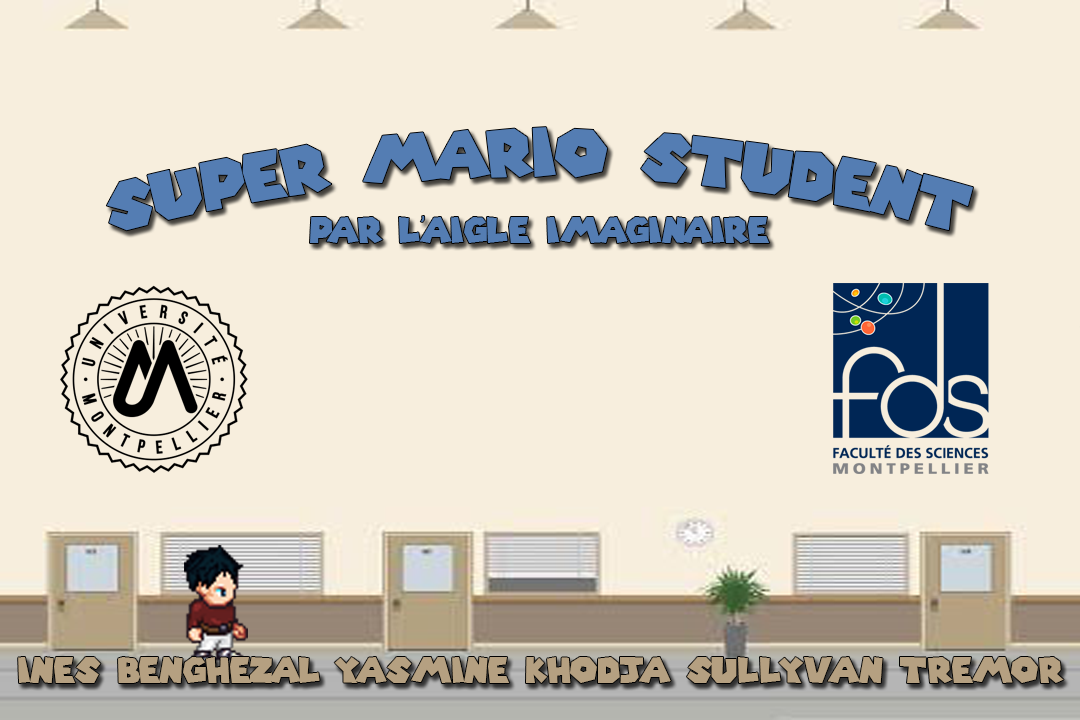
<style>
.page{position:relative;width:1080px;height:720px;background:#f7eedd}
.page>*{position:absolute;margin:0}
.t1{font:65.4px "SuperMarioGalaxy";color:#547db3}
.t2{font:35.2px "SuperMarioGalaxy";color:#547db3}
.t3{font:35px "SuperMarioGalaxy";color:#b5a081}
</style>
<div class="page">
<p class="t1" style="left:106px;top:127px;width:867px;height:104px">Super mario student</p>
<p class="t2" style="left:310px;top:216px;width:460px;height:27px">Par l’aigle imaginaire</p>
<p class="t3" style="left:18px;top:657px;width:1046px;height:26px">Ines benghezal yasmine khodja sulLyvan tremor</p>
</div>
